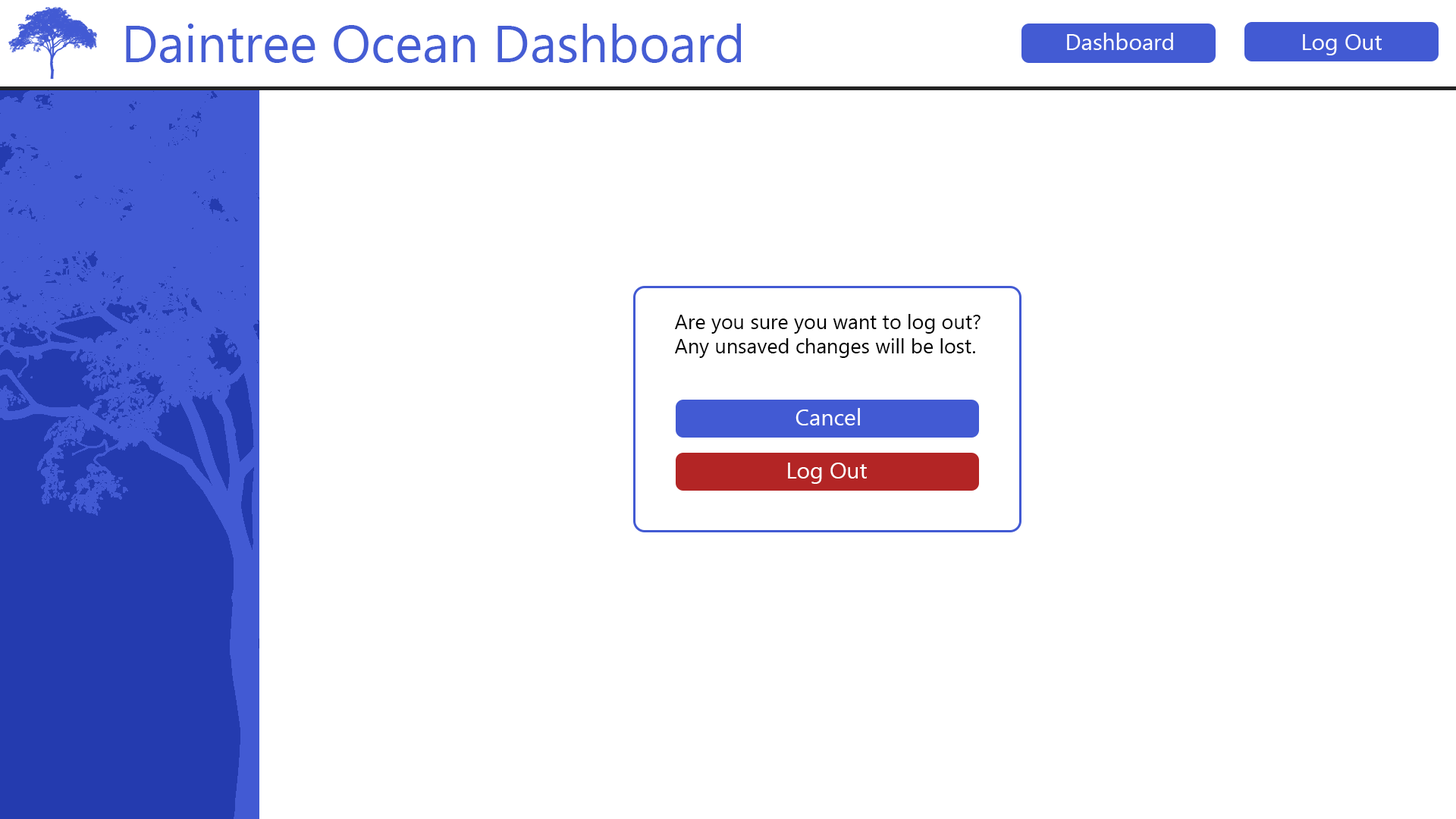
<style>
.page{position:relative;width:1456px;height:819px;background:#ffffff}
.page>*{position:absolute;margin:0}
.t1{font:52.3px "MyanmarText";color:#455dd4}
.t2{font:22.7px "MyanmarText";color:#ffffff}
.t3{font:20.5px "MyanmarText";color:#000000}
</style>
<div class="page">
<p class="t1" style="left:126px;top:24px;width:615px;height:39px">Daintree Ocean Dashboard</p>
<p class="t2" style="left:1067px;top:33px;width:106px;height:17px">Dashboard</p>
<p class="t2" style="left:1303px;top:34px;width:79px;height:21px">Log Out</p>
<p class="t3" style="left:675px;top:314px;width:306px;height:44px">Are you sure you want to log out?<br>Any unsaved changes will be lost.</p>
<p class="t2" style="left:795px;top:408px;width:65px;height:17px">Cancel</p>
<p class="t2" style="left:788px;top:463px;width:79px;height:21px">Log Out</p>
</div>
